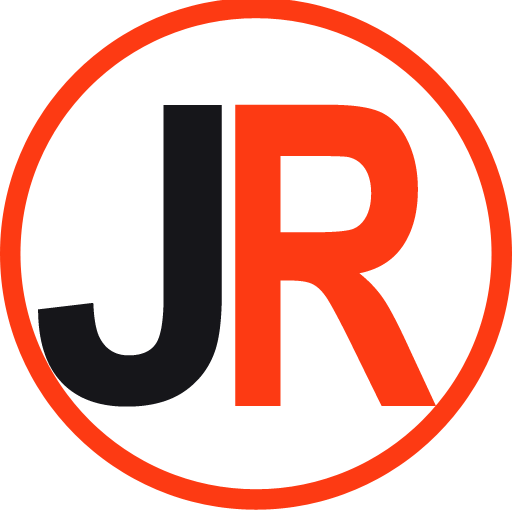
<style>
.page{position:relative;width:512px;height:512px;background:#ffffff}
.page>*{position:absolute;margin:0}
.t1{font:413.3px "Arial-BoldMT";color:#16161a}
.t2{font:420.2px "Arial-BoldMT";color:#fd3a13;scale:0.75 1}
</style>
<div class="page">
<p class="t1" style="left:38px;top:105px;width:184px;height:302px">J</p>
<p class="t2" style="left:235px;top:104px;width:201px;height:302px">R</p>
</div>
